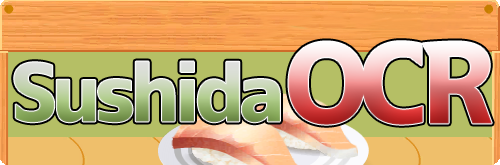
<style>
.page{position:relative;width:500px;height:165px}
.page>*{position:absolute;margin:0}
.t1{font:111px "07AkazukinPop";letter-spacing:-0.08em}
.t2{font:80px "07AkazukinPop";letter-spacing:-0.08em}
</style>
<div class="page">
<p class="t1" style="left:288px;top:41px;width:204px;height:84px">OCR</p>
<p class="t2" style="left:14px;top:61px;width:266px;height:62px">Sushida</p>
</div>
